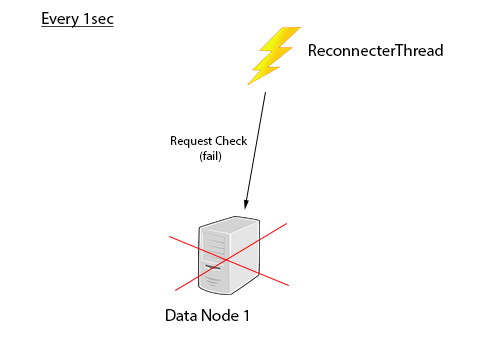
<style>
.page{position:relative;width:500px;height:350px;background:#ffffff}
.page>*{position:absolute;margin:0}
.t1{font:16.7px "MyriadPro-Regular";color:#000000;text-decoration:underline}
.t2{font:16.7px "MyriadPro-Regular";color:#000000}
.t3{font:12.5px "MyriadPro-Regular";color:#000000}
</style>
<div class="page">
<p class="t1" style="left:41px;top:12px;width:73px;height:16px">Every 1sec</p>
<p class="t2" style="left:309px;top:44px;width:134px;height:12px">ReconnecterThread</p>
<p class="t3" style="left:171px;top:136px;width:77px;height:26px">Request Check<br>           (fail)</p>
<p class="t2" style="left:166px;top:309px;width:82px;height:12px">Data Node 1</p>
</div>
